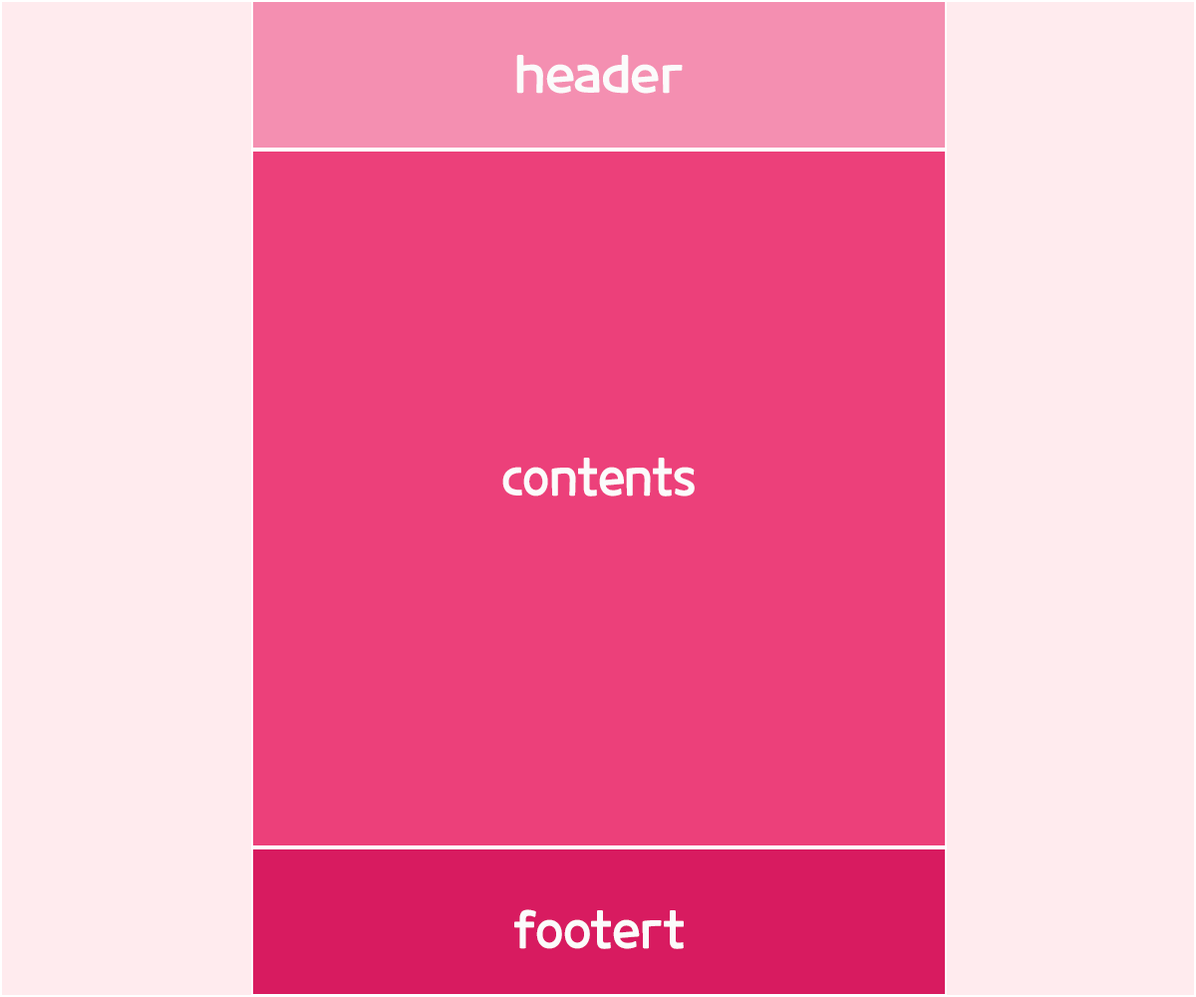
<style>
.page{position:relative;width:1196px;height:997px;background:#ffebee}
.page>*{position:absolute;margin:0}
.t1{font:49.8px "CookieRun-Regular";color:#fbfbfb}
.t2{font:49.8px "CookieRun-Regular";color:#fbfbfb;scale:0.91 1}
.t3{font:49.8px "CookieRun-Regular";color:#fbfbfb;scale:0.96 1}
</style>
<div class="page">
<p class="t1" style="left:516px;top:55px;width:167px;height:39px">header</p>
<p class="t2" style="left:502px;top:458px;width:193px;height:38px">contents</p>
<p class="t3" style="left:514px;top:909px;width:170px;height:40px">footert</p>
</div>
